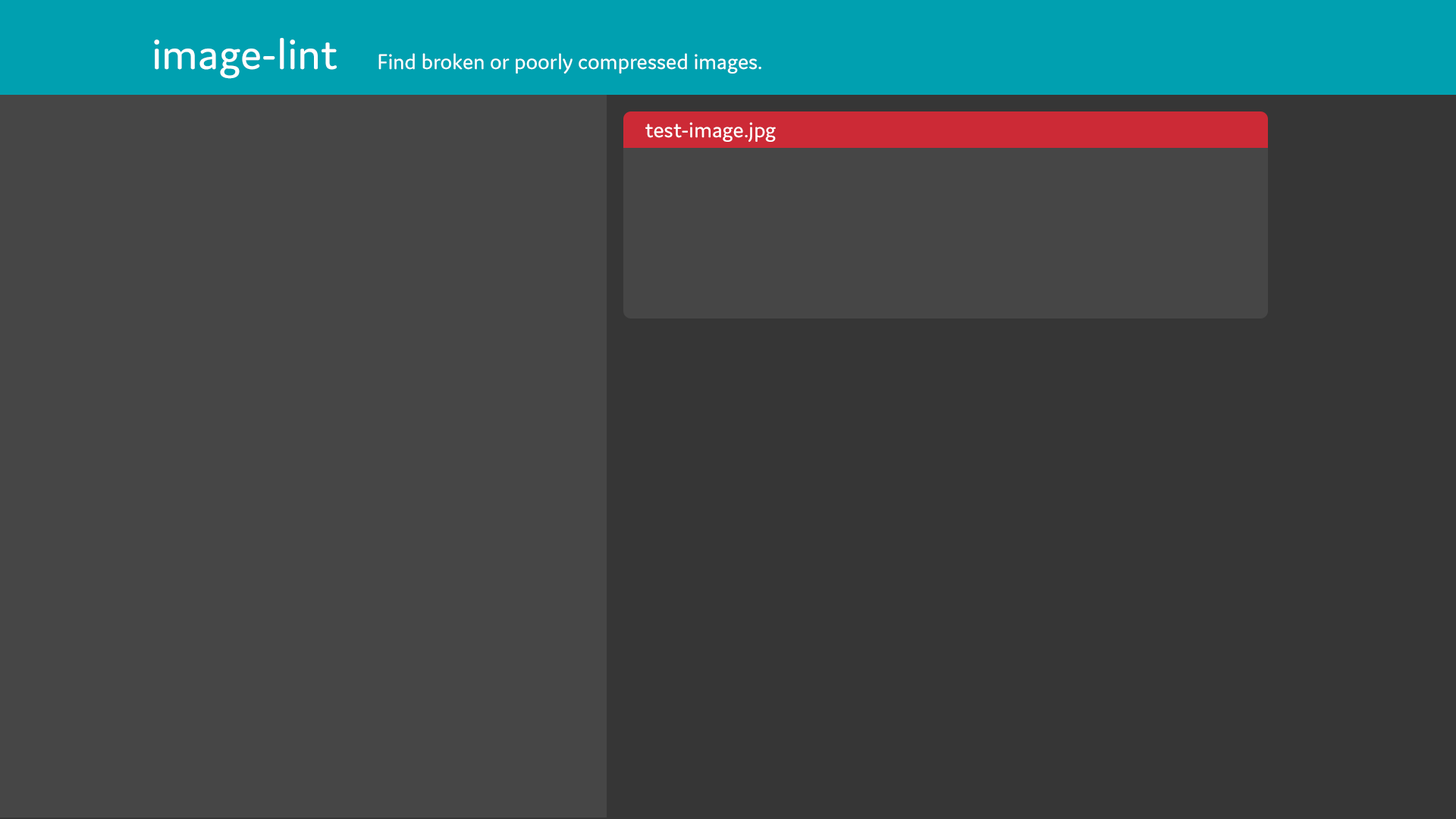
<style>
.page{position:relative;width:1456px;height:819px;background:#464646}
.page>*{position:absolute;margin:0}
.t1{font:45.5px "Domus-Regular";color:#ffffff}
.t2{font:22.7px "Domus-Regular";color:#ffffff}
</style>
<div class="page">
<p class="t1" style="left:154px;top:38px;width:183px;height:41px">image-lint</p>
<p class="t2" style="left:378px;top:53px;width:383px;height:21px">Find broken or poorly compressed images.</p>
<p class="t2" style="left:645px;top:122px;width:131px;height:20px">test-image.jpg</p>
</div>
